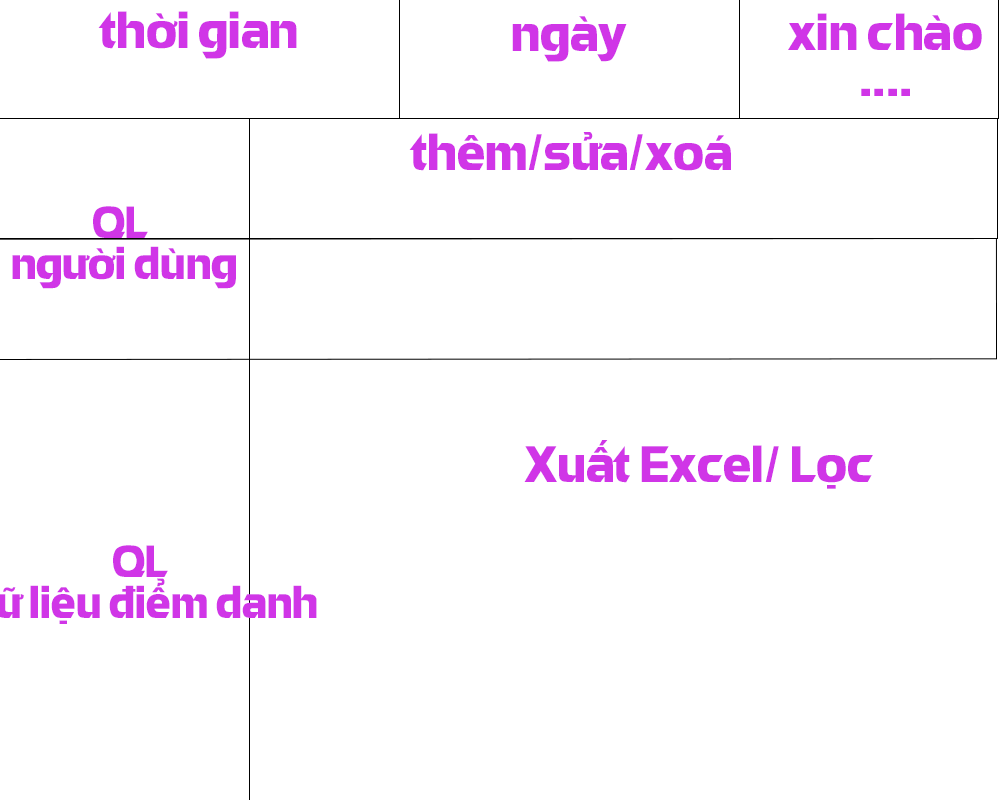
<style>
.page{position:relative;width:1000px;height:800px;background:#ffffff}
.page>*{position:absolute;margin:0}
.t1{font:50px "UTM-Eremitage";color:#d035e7}
.t2{font:50px/45.8px "UTM-Eremitage";color:#d035e7}
.t3{font:44px/40.4px "UTM-Eremitage";color:#d035e7}
</style>
<div class="page">
<p class="t1" style="left:98px;top:11px;width:199px;height:48px">thời gian</p>
<p class="t1" style="left:512px;top:16px;width:115px;height:46px">ngày</p>
<p class="t2" style="left:788px;top:13px;width:194px;height:83px;text-align:center">xin chào<br>....</p>
<p class="t1" style="left:409px;top:132px;width:322px;height:39px">thêm/sửa/xoá</p>
<p class="t3" style="left:12px;top:206px;width:224px;height:83px;text-align:center">QL <br>người dùng</p>
<p class="t1" style="left:524px;top:440px;width:349px;height:49px">Xuất Excel/ Lọc</p>
</div>
